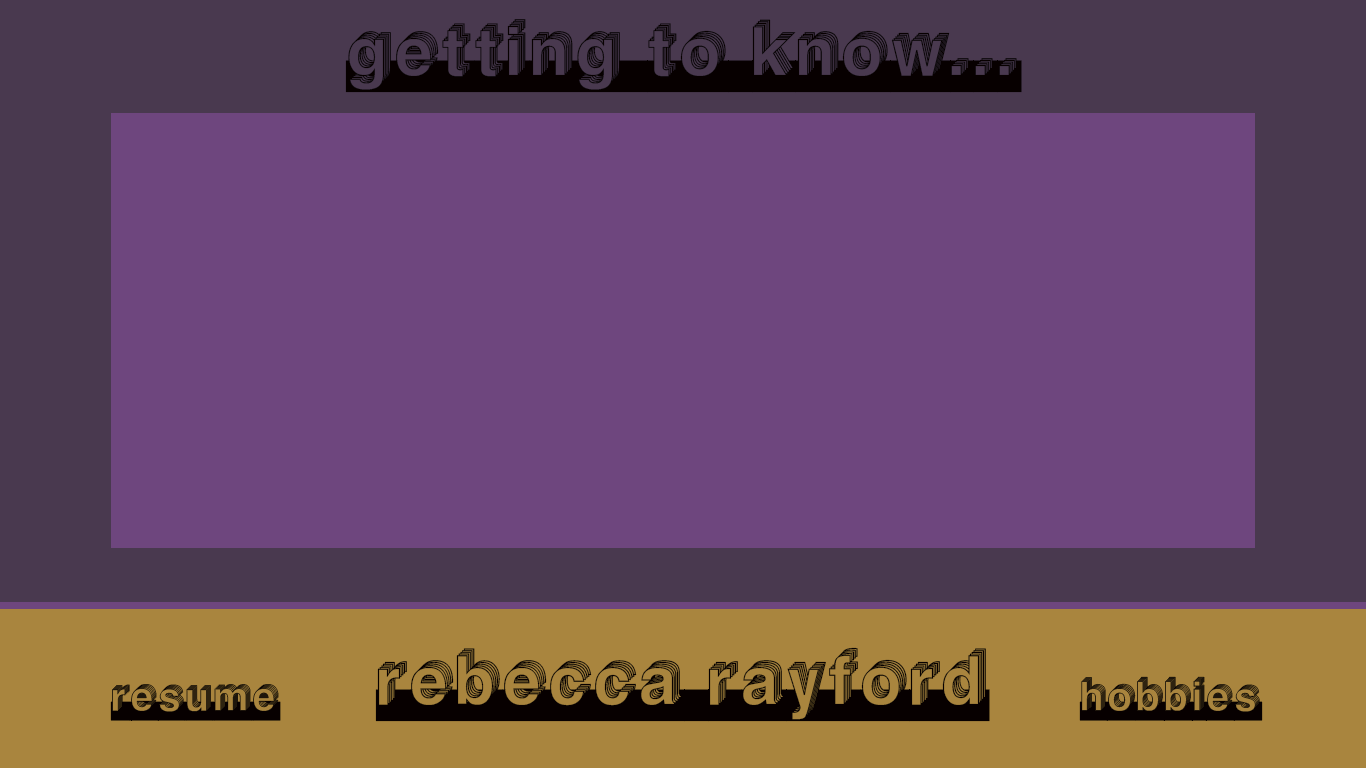
<style>
.page{position:relative;width:1366px;height:768px;background:#6e467e}
.page>*{position:absolute;margin:0}
.t1{font:80px "Level";color:#070000}
.t2{font:48px "Level";color:#070000}
</style>
<div class="page">
<p class="t1" style="left:345px;top:19px;width:677px;height:74px">getting_to_know...</p>
<p class="t1" style="left:375px;top:647px;width:615px;height:75px">Rebecca_Rayford</p>
<p class="t2" style="left:1079px;top:676px;width:184px;height:45px">hobbies</p>
<p class="t2" style="left:110px;top:684px;width:171px;height:37px">Resume</p>
</div>
